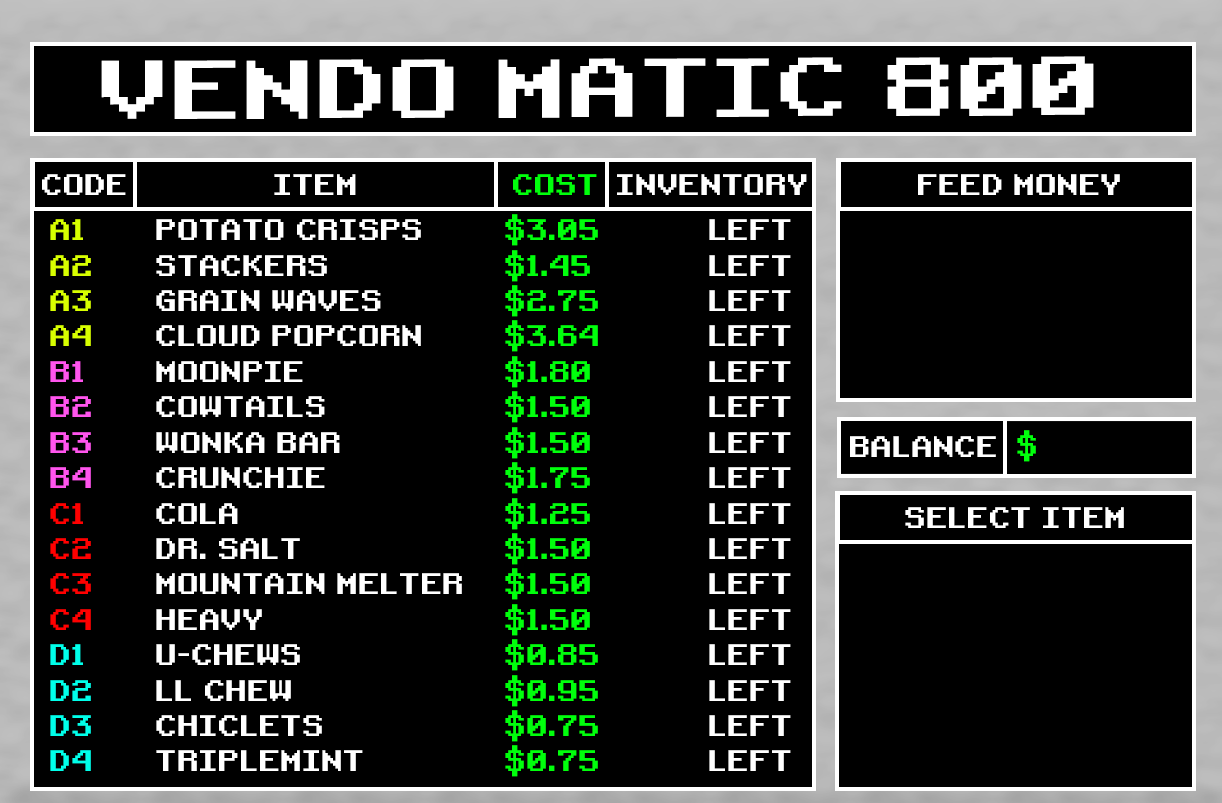
<style>
.page{position:relative;width:1222px;height:803px;background:#000000}
.page>*{position:absolute;margin:0}
.t1{font:80.1px "RetroGaming";letter-spacing:-0.01em;color:#ffffff;scale:1.19 1}
.t2{font:28.4px "RetroGaming";letter-spacing:-0.01em;color:#ffffff}
.t3{font:28.4px "RetroGaming";letter-spacing:-0.01em;color:#00ff0c}
.t4{font:28.4px/35.4px "RetroGaming";letter-spacing:-0.01em;color:#d8ff00}
.t5{font:28.4px/35.4px "RetroGaming";letter-spacing:-0.01em;color:#ff55ed}
.t6{font:28.4px/35.4px "RetroGaming";letter-spacing:-0.01em;color:#ff0000}
.t7{font:28.4px/35.4px "RetroGaming";letter-spacing:-0.01em;color:#00ffea}
.t8{font:28.4px/35.4px "RetroGaming";letter-spacing:-0.01em;color:#ffffff}
.t9{font:28.4px/35.4px "RetroGaming";letter-spacing:-0.01em;color:#00ff0c}
</style>
<div class="page">
<p class="t1" style="left:101px;top:56px;width:993px;height:63px">VENDO MATIC 800</p>
<p class="t2" style="left:42px;top:174px;width:84px;height:21px">CODE</p>
<p class="t2" style="left:274px;top:174px;width:82px;height:21px">ITEM</p>
<p class="t3" style="left:513px;top:174px;width:84px;height:21px">COST</p>
<p class="t2" style="left:617px;top:174px;width:190px;height:21px">INVENTORY</p>
<p class="t2" style="left:918px;top:174px;width:202px;height:21px">FEED MONEY</p>
<p class="t4" style="left:50px;top:219px;width:41px;height:552px">A1<br>A2<br>A3<br>A4<br><span class="t5">B1<br>B2<br>B3<br>B4<br></span><span class="t6">C1<br>C2<br>C3<br>C4<br></span><span class="t7">D1<br>D2<br>D3<br>D4</span></p>
<p class="t8" style="left:156px;top:219px;width:306px;height:552px">POTATO CRISPS<br>STACKERS<br>GRAIN WAVES<br>CLOUD POPCORN<br>MOONPIE<br>COWTAILS<br>WONKA BAR<br>CRUNCHIE<br>COLA<br>DR. SALT<br>MOUNTAIN MELTER<br>HEAVY<br>U-CHEWS<br>LL CHEW<br>CHICLETS<br>TRIPLEMINT</p>
<p class="t9" style="left:505px;top:214px;width:93px;height:563px">$3.05<br>$1.45<br>$2.75<br>$3.64<br>$1.80<br>$1.50<br>$1.50<br>$1.75<br>$1.25<br>$1.50<br>$1.50<br>$1.50<br>$0.85<br>$0.95<br>$0.75<br>$0.75</p>
<p class="t8" style="left:709px;top:219px;width:82px;height:552px">LEFT<br>LEFT<br>LEFT<br>LEFT<br>LEFT<br>LEFT<br>LEFT<br>LEFT<br>LEFT<br>LEFT<br>LEFT<br>LEFT<br>LEFT<br>LEFT<br>LEFT<br>LEFT</p>
<p class="t2" style="left:850px;top:436px;width:146px;height:21px">BALANCE</p>
<p class="t3" style="left:1017px;top:430px;width:19px;height:32px">$</p>
<p class="t2" style="left:905px;top:507px;width:219px;height:21px">SELECT ITEM</p>
</div>
